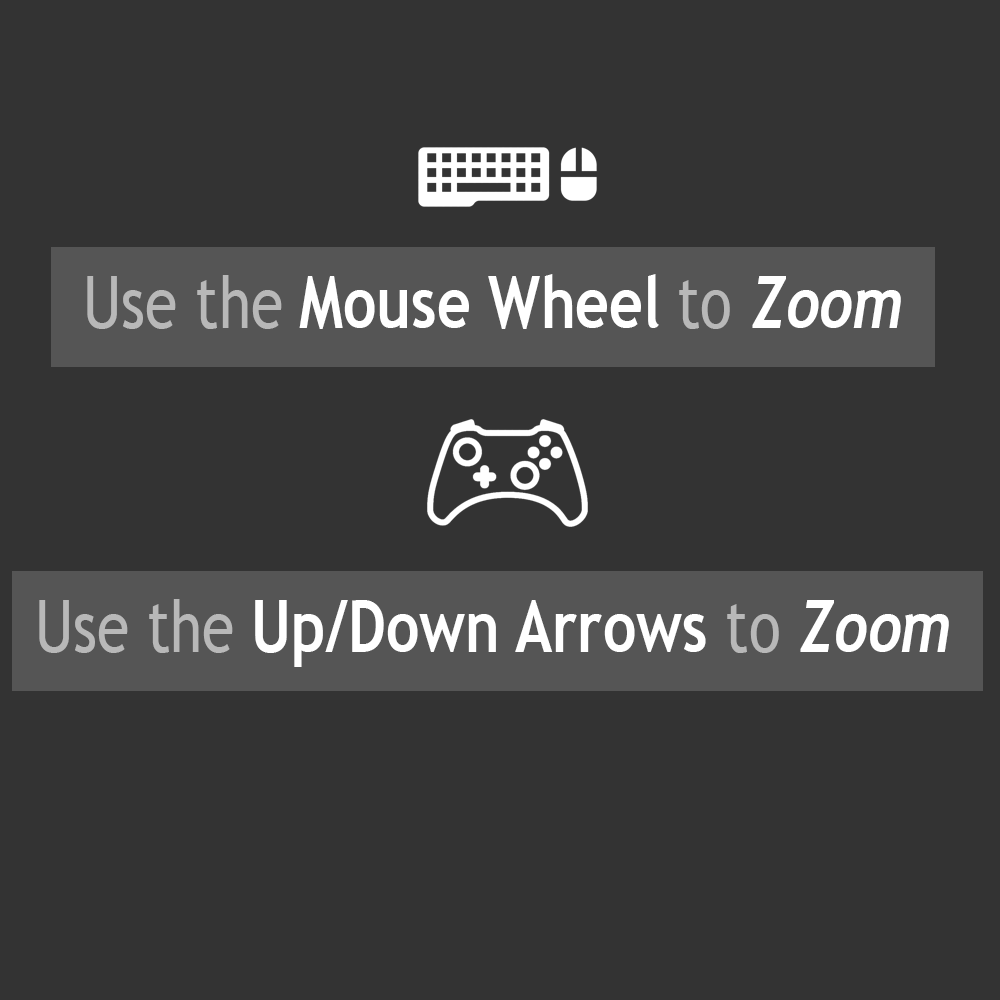
<style>
.page{position:relative;width:1000px;height:1000px;background:#333333}
.page>*{position:absolute;margin:0}
.t1{font:72.1px "TrebuchetMS-Bold";color:#ffffff;scale:0.82 1}
.t2{font:72.1px "TrebuchetMS";color:#b8b8b8;scale:0.82 1}
.t3{font:72.1px "Trebuchet-BoldItalic";color:#ffffff;scale:0.82 1}
</style>
<div class="page">
<p class="t1" style="left:87px;top:274px;width:814px;height:55px"><span class="t2">Use the </span>Mouse Wheel <span class="t2">to </span><span class="t3">Zoom</span></p>
<p class="t1" style="left:39px;top:599px;width:910px;height:68px"><span class="t2">Use the </span>Up/Down Arrows <span class="t2">to </span><span class="t3">Zoom</span></p>
</div>
